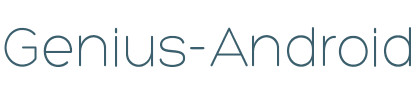
<style>
.page{position:relative;width:420px;height:93px;background:#ffffff}
.page>*{position:absolute;margin:0}
.t1{font:58.7px "Hero-Light";color:#3b5f6d;scale:0.94 1}
</style>
<div class="page">
<p class="t1" style="left:4px;top:27px;width:407px;height:40px">Genius-Android</p>
</div>
